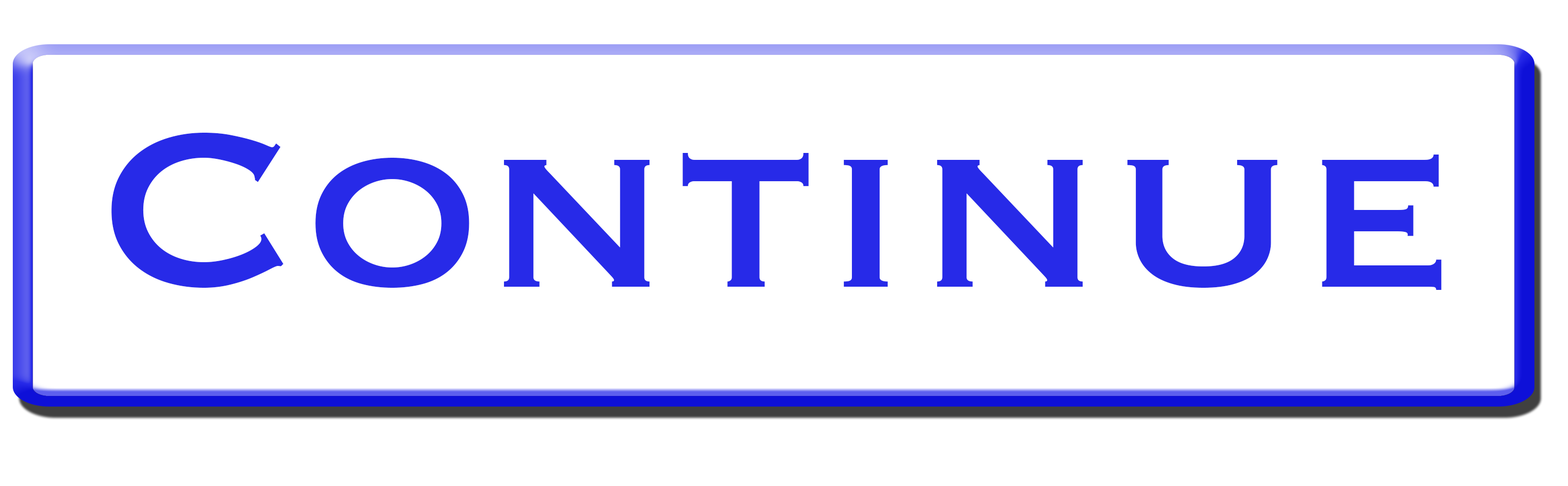
<style>
.page{position:relative;width:1568px;height:486px;background:#ffffff}
.page>*{position:absolute;margin:0}
.t1{font:288.6px "Copperplate";color:#272ae8}
</style>
<div class="page">
<p class="t1" style="left:111px;top:133px;width:1331px;height:157px">Continue</p>
</div>
